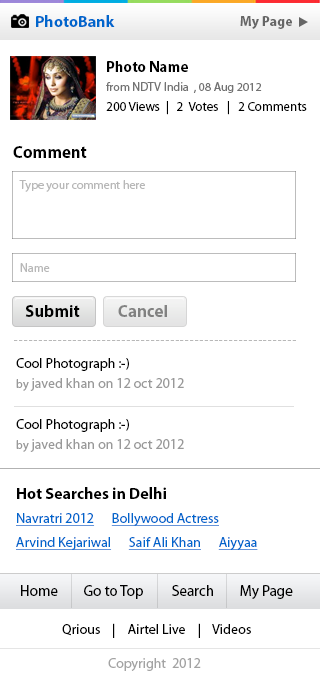
<style>
.page{position:relative;width:320px;height:683px;background:#ffffff}
.page>*{position:absolute;margin:0}
.t1{font:16px "MyriadPro-Bold";color:#0066cc}
.t2{font:14px "MyriadPro-Bold";color:#666666}
.t3{font:15px "MyriadPro-Bold";color:#000000}
.t4{font:12px "MyriadPro-Regular";color:#737373}
.t5{font:13px "MyriadPro-Regular";color:#000000}
.t6{font:17px "MyriadPro-Bold";color:#000000}
.t7{font:12px "MyriadPro-Regular";color:#b8b8b8}
.t8{font:17px "MyriadPro-Bold";color:#818181}
.t9{font:12px "MyriadPro-Regular";letter-spacing:0.1em;color:#b8b8b8}
.t10{font:14px/20px "MyriadPro-Regular";color:#999999}
.t11{font:14px/20px "MyriadPro-Regular";color:#000000}
.t12{font:12px/20px "MyriadPro-Regular";color:#999999}
.t13{font:16px "MyriadPro-Bold";color:#000000}
.t14{font:14px/24px "MyriadPro-Regular";color:#0066cc;text-decoration:underline}
.t15{font:15px "MyriadPro-Regular";color:#000000}
.t16{font:14px "MyriadPro-Regular";color:#000000}
.t17{font:14px "MyriadPro-Regular";color:#a3a3a3}
</style>
<div class="page">
<p class="t1" style="left:36px;top:15px;width:79px;height:12px">PhotoBank</p>
<p class="t2" style="left:240px;top:16px;width:52px;height:13px">My Page</p>
<p class="t3" style="left:107px;top:61px;width:81px;height:11px">Photo Name</p>
<p class="t4" style="left:106px;top:82px;width:156px;height:11px">from NDTV India  , 08 Aug 2012</p>
<p class="t5" style="left:106px;top:101px;width:201px;height:14px">200 Views  |   2  Votes   |   2 Comments</p>
<p class="t6" style="left:13px;top:146px;width:74px;height:12px">Comment</p>
<p class="t7" style="left:19px;top:180px;width:126px;height:12px">Type your comment here</p>
<p class="t7" style="left:20px;top:263px;width:30px;height:9px">Name</p>
<p class="t6" style="left:25px;top:305px;width:55px;height:12px">Submit</p>
<p class="t8" style="left:118px;top:305px;width:49px;height:12px">Cancel</p>
<p class="t9" style="left:14px;top:340px;width:282px;height:1px">----------------------------------------------------------</p>
<p class="t10" style="left:16px;top:358px;width:168px;height:33px"><span class="t11">Cool Photograph :-)<br></span><span class="t12">by</span> javed khan on 12 oct 2012</p>
<p class="t10" style="left:16px;top:419px;width:168px;height:33px"><span class="t11">Cool Photograph :-)<br></span><span class="t12">by</span> javed khan on 12 oct 2012</p>
<p class="t13" style="left:17px;top:487px;width:149px;height:12px">Hot Searches in Delhi</p>
<p class="t14" style="left:16px;top:513px;width:242px;height:37px">Navratri 2012      Bollywood Actress     <br>Arvind Kejariwal      Saif Ali Khan      Aiyyaa</p>
<p class="t15" style="left:21px;top:585px;width:272px;height:14px">Home        Go to Top         Search        My Page</p>
<p class="t16" style="left:62px;top:623px;width:189px;height:15px">Qrious    |    Airtel Live    |    Videos</p>
<p class="t17" style="left:108px;top:658px;width:93px;height:13px">Copyright  2012</p>
</div>
